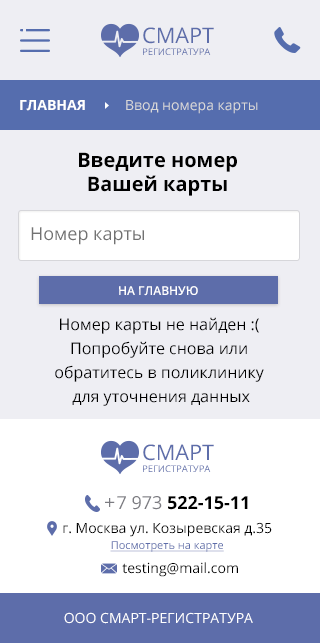
<style>
.page{position:relative;width:320px;height:643px;background:#eeeef3}
.page>*{position:absolute;margin:0}
.t1{font:9.3px/11.5px "OpenSans";color:#5d6daa}
.t2{font:21.5px/11.5px "OpenSans";color:#5d6daa}
.t3{font:14px "OpenSans";color:#d8d8d8}
.t4{font:14px "OpenSans-Bold";color:#ffffff}
.t5{font:20px "OpenSans-Bold";color:#000000}
.t6{font:18px "OpenSans";color:#727272}
.t7{font:12.1px "OpenSans-Semibold";color:#ffffff;text-transform:uppercase}
.t8{font:16px/24px "OpenSans";color:#000000}
.t9{font:18px "OpenSans-Bold";color:#000000}
.t10{font:18px "OpenSans";color:#000000}
.t11{font:18px "OpenSans";color:#7b7b81}
.t12{font:18px "HelveticaNeue";color:#7b7b81}
.t13{font:14px/14px "OpenSans";color:#000000}
.t14{font:11px/16px "OpenSans";color:#5d6daa;text-decoration:underline}
.t15{font:14px "OpenSans";color:#000000}
.t16{font:14px "OpenSans";color:#ffffff}
</style>
<div class="page">
<p class="t1" style="left:143px;top:27px;width:71px;height:28px"><span class="t2">CМАРТ<br></span>РЕГИСТРАТУРА</p>
<p class="t3" style="left:20px;top:100px;width:238px;height:14px"><span class="t4">ГЛАВНАЯ          </span>Ввод номера карты</p>
<p class="t5" style="left:79px;top:152px;width:158px;height:44px;text-align:center">Введите номер<br>Вашей карты</p>
<p class="t6" style="left:31px;top:227px;width:113px;height:18px">Номер карты</p>
<p class="t7" style="left:119px;top:286px;width:79px;height:10px">НА ГЛАВНУЮ</p>
<p class="t8" style="left:55px;top:317px;width:209px;height:89px;text-align:center">Номер карты не найден :( <br>Попробуйте снова или <br>обратитесь в поликлинику <br>для уточнения данных</p>
<p class="t1" style="left:143px;top:444px;width:71px;height:28px"><span class="t2">CМАРТ<br></span>РЕГИСТРАТУРА</p>
<p class="t9" style="left:117px;top:496px;width:131px;height:14px"><span class="t10">  </span><span class="t11">7 973 </span>522-15-11</p>
<p class="t12" style="left:105px;top:498px;width:10px;height:9px">+</p>
<p class="t13" style="left:63px;top:522px;width:209px;height:30px;text-align:center">г. Москва ул. Козыревская д.35<br><span class="t14">Посмотреть на карте</span></p>
<p class="t15" style="left:122px;top:562px;width:116px;height:15px">testing@mail.com</p>
<p class="t16" style="left:64px;top:612px;width:189px;height:12px">ООО СМАРТ-РЕГИСТРАТУРА</p>
</div>
